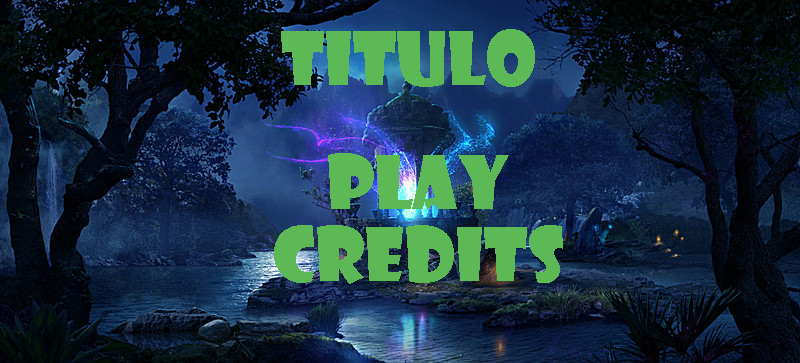
<style>
.page{position:relative;width:800px;height:363px}
.page>*{position:absolute;margin:0}
.t1{font:72px "ShowcardGothic-Reg";color:#5cb955}
</style>
<div class="page">
<p class="t1" style="left:281px;top:29px;width:254px;height:58px">TITULO</p>
<p class="t1" style="left:328px;top:153px;width:181px;height:57px">pLAY</p>
<p class="t1" style="left:274px;top:225px;width:289px;height:59px">CREDITS</p>
</div>
